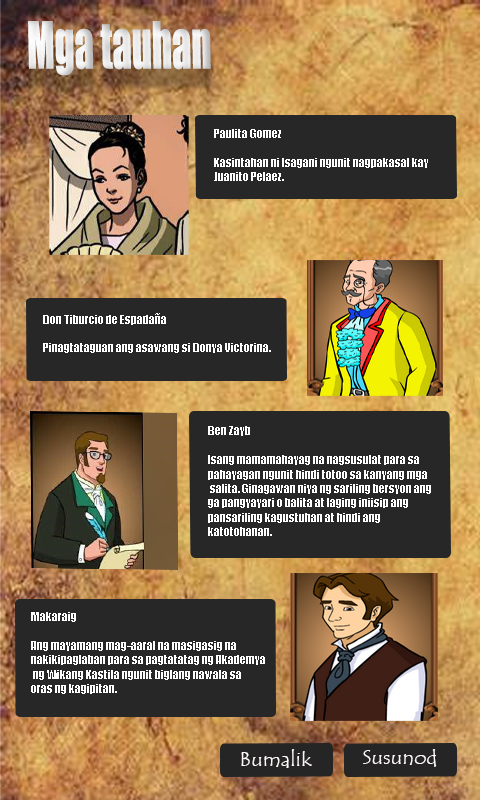
<style>
.page{position:relative;width:480px;height:800px;background:#272727}
.page>*{position:absolute;margin:0}
.t1{font:60px "Impact";color:#ffffff;scale:0.64 1}
.t2{font:12px "Impact";color:#ffffff}
.t3{font:20px "TempusSansITC";color:#fef8f8;scale:1.06 1}
</style>
<div class="page">
<p class="t1" style="left:28px;top:21px;width:183px;height:55px">Mga tauhan</p>
<p class="t2" style="left:214px;top:129px;width:214px;height:52px">Paulita Gomez<br><br>Kasintahan ni Isagani ngunit nagpakasal kay <br>Juanito Pelaez.</p>
<p class="t2" style="left:43px;top:313px;width:228px;height:40px">Don Tiburcio de Espadaña<br><br>Pinagtataguan ang asawang si Donya Victorina.</p>
<p class="t2" style="left:208px;top:426px;width:223px;height:110px">Ben Zayb<br><br>Isang mamamahayag na nagsusulat para sa <br>pahayagan ngunit hindi totoo sa kanyang mga<br> salita. Ginagawan niya ng sariling bersyon ang <br>ga pangyayari o balita at laging iniisip ang <br>pansariling kagustuhan at hindi ang <br>katotohanan.</p>
<p class="t2" style="left:31px;top:612px;width:234px;height:82px">Makaraig<br><br>Ang mayamang mag-aaral na masigasig na <br>nakikipaglaban para sa pagtatatag ng Akademya<br> ng Wikang Kastila ngunit biglang nawala sa <br>oras ng kagipitan.</p>
<p class="t3" style="left:241px;top:749px;width:71px;height:19px">Bumalik</p>
<p class="t3" style="left:363px;top:749px;width:74px;height:18px">Susunod</p>
</div>
